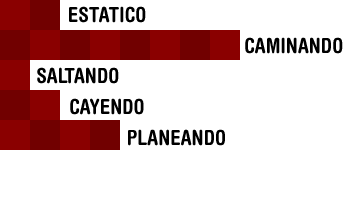
<style>
.page{position:relative;width:350px;height:210px;background:#ffffff}
.page>*{position:absolute;margin:0}
.t1{font:21px "HelveticaRoundedLTStd-BdCn";color:#000000;text-transform:uppercase}
</style>
<div class="page">
<p class="t1" style="left:69px;top:6px;width:77px;height:17px">estatico</p>
<p class="t1" style="left:245px;top:37px;width:98px;height:17px">Caminando</p>
<p class="t1" style="left:37px;top:67px;width:82px;height:17px">Saltando</p>
<p class="t1" style="left:70px;top:98px;width:74px;height:17px">cayendo</p>
<p class="t1" style="left:128px;top:129px;width:97px;height:17px">planeando</p>
</div>
